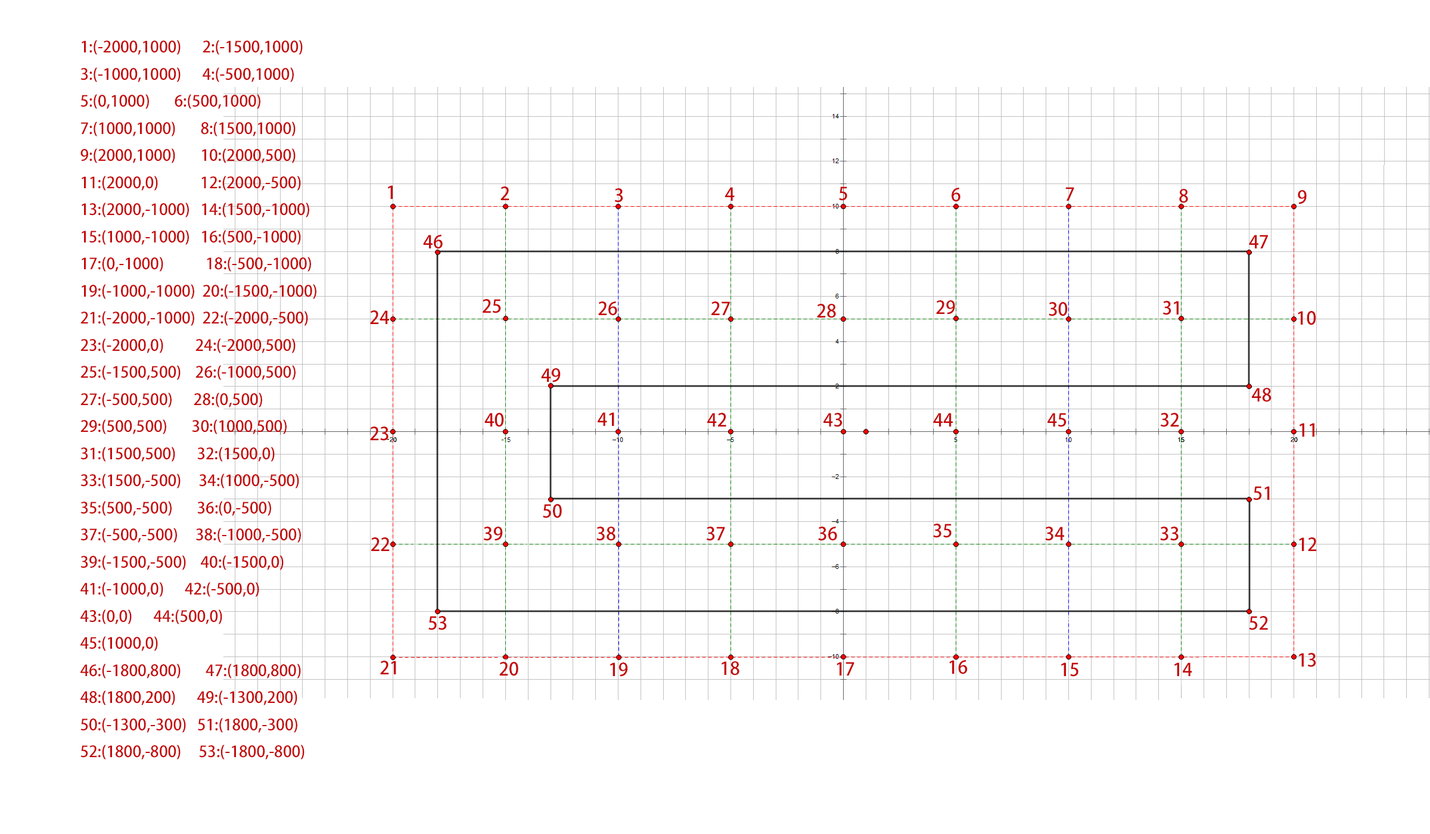
<style>
.page{position:relative;width:1430px;height:834px;background:#ffffff}
.page>*{position:absolute;margin:0}
.t1{font:15.5px "AdobeHeitiStd-Regular";color:#c40a0a}
.t2{font:17.9px "AdobeHeitiStd-Regular";color:#c40a0a}
</style>
<div class="page">
<p class="t1" style="left:80px;top:40px;width:236px;height:720px">1:(-2000,1000)      2:(-1500,1000)<br>3:(-1000,1000)      4:(-500,1000)<br>5:(0,1000)       6:(500,1000)<br>7:(1000,1000)       8:(1500,1000)<br>9:(2000,1000)       10:(2000,500)<br>11:(2000,0)            12:(2000,-500)<br>13:(2000,-1000)   14:(1500,-1000)<br>15:(1000,-1000)   16:(500,-1000)<br>17:(0,-1000)            18:(-500,-1000)<br>19:(-1000,-1000)  20:(-1500,-1000)<br>21:(-2000,-1000)  22:(-2000,-500)<br>23:(-2000,0)         24:(-2000,500)<br>25:(-1500,500)    26:(-1000,500)<br>27:(-500,500)      28:(0,500)<br>29:(500,500)       30:(1000,500)<br>31:(1500,500)      32:(1500,0)<br>33:(1500,-500)     34:(1000,-500)<br>35:(500,-500)       36:(0,-500)<br>37:(-500,-500)     38:(-1000,-500)<br>39:(-1500,-500)    40:(-1500,0)<br>41:(-1000,0)      42:(-500,0)<br>43:(0,0)      44:(500,0)<br>45:(1000,0)<br>46:(-1800,800)       47:(1800,800)<br>48:(1800,200)      49:(-1300,200)<br>50:(-1300,-300)   51:(1800,-300)<br>52:(1800,-800)     53:(-1800,-800)</p>
<p class="t2" style="left:423px;top:235px;width:20px;height:14px">46</p>
<p class="t2" style="left:1249px;top:235px;width:19px;height:13px">47</p>
<p class="t2" style="left:541px;top:368px;width:20px;height:14px">49</p>
<p class="t2" style="left:1252px;top:388px;width:19px;height:14px">48</p>
<p class="t2" style="left:1253px;top:486px;width:16px;height:14px">51</p>
<p class="t2" style="left:543px;top:504px;width:19px;height:14px">50</p>
<p class="t2" style="left:428px;top:616px;width:19px;height:14px">53</p>
<p class="t2" style="left:1249px;top:616px;width:19px;height:14px">52</p>
</div>
